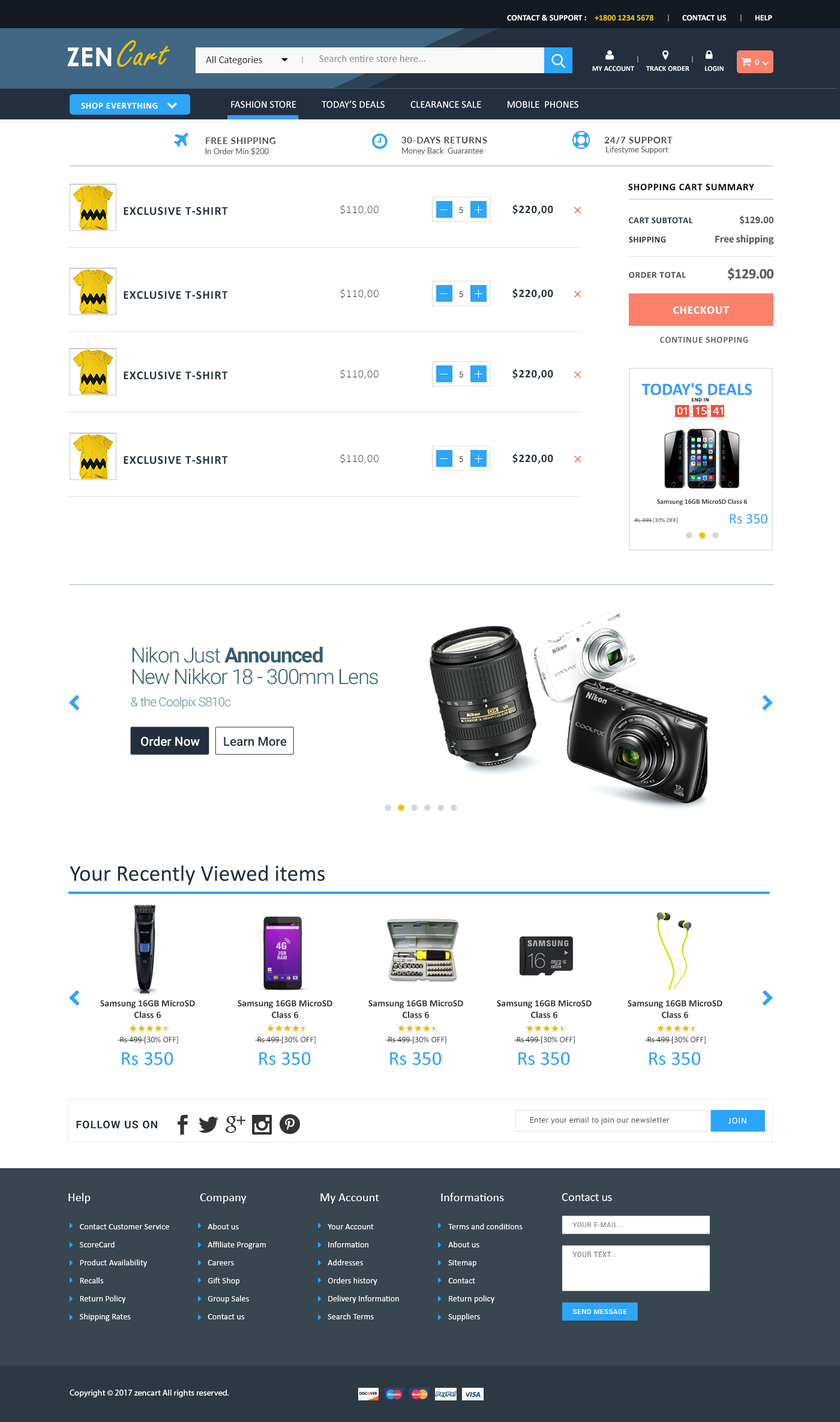
<style>
.page{position:relative;width:840px;height:1422px;background:#ffffff}
.page>*{position:absolute;margin:0}
.t1{font:8.4px "Calibri-Bold";color:#ffffff;text-transform:uppercase}
.t2{font:8.4px "Calibri-Bold";color:#edc300;text-transform:uppercase}
.t3{font:7.2px "Calibri-Bold";text-transform:uppercase}
.t4{font:38.4px "FreestyleScript-Regular";color:#edc300;font-weight:bold}
.t5{font:26px "CenturyGothic-Bold";letter-spacing:0.02em;color:#ffffff;text-transform:uppercase}
.t6{font:10.2px "Calibri";color:#32302f}
.t7{font:7.8px "Calibri"}
.t8{font:10.2px "Calibri";color:#8e8e8e}
.t9{font:7.2px "Calibri-Bold";letter-spacing:0.01em;color:#ffffff;text-transform:uppercase}
.t10{font:9px "Calibri-Bold";color:#e5edf4;text-transform:uppercase}
.t11{font:10.2px "Calibri";color:#ffffff}
.t12{font:9px "Calibri-Bold";letter-spacing:0.05em;color:#ffffff;text-transform:uppercase}
.t13{font:9px "Lato-Bold";letter-spacing:0.05em;color:#4b4b4b}
.t14{font:7.8px "Lato-Regular";color:#666666}
.t15{font:10px "Calibri-Bold";letter-spacing:0.05em;color:#131a22}
.t16{font:12px "Calibri-Bold";letter-spacing:0.05em;color:#232f3e}
.t17{font:10.8px "Calibri-Light";letter-spacing:0.05em;color:#232f3e}
.t18{font:9px "SourceSansPro-Regular";letter-spacing:0.05em;color:#595959}
.t19{font:11.4px "Calibri-Bold";letter-spacing:0.05em;color:#232f3e}
.t20{font:9px/9.6px "Calibri-Bold";letter-spacing:0.025em;color:#232f3e;text-transform:uppercase}
.t21{font:10.2px/9.6px "SourceSansPro-Bold";letter-spacing:-0.015em;color:#595959}
.t22{font:14.4px "Calibri-Bold";letter-spacing:-0.015em;color:#595959}
.t23{font:9px "Calibri-Bold";letter-spacing:0.05em;color:#595959}
.t24{font:11.4px "Calibri-Bold";letter-spacing:0.05em;color:#ffffff}
.t25{font:9px "Calibri-Bold";letter-spacing:0.05em;color:#676666;text-transform:uppercase}
.t26{font:17.5px "Calibri-Bold";color:#379aff;text-transform:uppercase}
.t27{font:5.2px "Calibri-Bold";letter-spacing:0.075em;color:#000000;text-transform:uppercase}
.t28{font:7px "Calibri-Bold";color:#373737}
.t29{font:6.1px "Calibri";color:#373737}
.t30{font:14.5px "Calibri";color:#2ca5fa}
.t31{font:20.8px/22px "Roboto-Light";letter-spacing:-0.04em;color:#325f70}
.t32{font:20.8px/22px "Roboto-Bold";letter-spacing:-0.04em;color:#325f70}
.t33{font:12.5px/22px "Roboto-Light";letter-spacing:-0.04em;color:#6397aa}
.t34{font:12.5px "Roboto-Medium";color:#ffffff}
.t35{font:12.5px "Roboto-Medium";color:#232f3e}
.t36{font:22.8px "Calibri";color:#232f3e}
.t37{font:9.6px "Calibri-Bold";color:#373737}
.t38{font:8.4px "Calibri";color:#373737}
.t39{font:19.9px "Calibri";color:#2ca5fa}
.t40{font:10.7px "Roboto-Bold";letter-spacing:0.05em;color:#232f3e}
.t41{font:7.6px "Roboto-Light";letter-spacing:0.05em;color:#3f3d3d}
.t42{font:9px "Calibri";letter-spacing:0.05em;color:#ffffff}
.t43{font:8.4px/18px "Calibri";letter-spacing:0.01em;color:#ffffff}
.t44{font:12px "Calibri";letter-spacing:0.01em;color:#ffffff}
.t45{font:12px "Calibri";color:#ffffff}
.t46{font:6.6px "Roboto-Regular";letter-spacing:0.07em;color:#7e7f84;text-transform:uppercase}
.t47{font:6.6px "Roboto-Regular";letter-spacing:0.07em;color:#ffffff;text-transform:uppercase}
.t48{font:8.4px "MyriadPro-Regular";letter-spacing:0.01em;color:#ffffff}
</style>
<div class="page">
<p class="t1" style="left:507px;top:14px;width:79px;height:7px">Contact &amp; Support :</p>
<p class="t1" style="left:595px;top:15px;width:177px;height:6px"><span class="t2">+1800 1234 5678 </span>              Contact Us               Help</p>
<p class="t3" style="left:668px;top:14px;width:1px;height:8px">|</p>
<p class="t3" style="left:740px;top:14px;width:2px;height:8px">|</p>
<p class="t4" style="left:117px;top:40px;width:53px;height:27px">Cart</p>
<p class="t5" style="left:67px;top:47px;width:45px;height:20px">Zen</p>
<p class="t6" style="left:206px;top:56px;width:56px;height:9px">All Categories</p>
<p class="t7" style="left:302px;top:56px;width:1px;height:8px">|</p>
<p class="t8" style="left:319px;top:55px;width:106px;height:7px">Search entire store here...</p>
<p class="t9" style="left:592px;top:66px;width:132px;height:5px">my account       Track Order         Login</p>
<p class="t3" style="left:637px;top:56px;width:1px;height:7px">|</p>
<p class="t3" style="left:692px;top:56px;width:1px;height:7px">|</p>
<p class="t10" style="left:755px;top:59px;width:5px;height:6px">0</p>
<p class="t11" style="left:231px;top:100px;width:347px;height:8px">FASHION STORE           TODAY’S DEALS           CLEARANCE SALE           MOBILE  PHONES</p>
<p class="t12" style="left:81px;top:103px;width:77px;height:6px">Shop Everything</p>
<p class="t13" style="left:206px;top:137px;width:69px;height:7px">FREE SHIPPING</p>
<p class="t13" style="left:401px;top:137px;width:86px;height:6px">30-DAYS RETURNS</p>
<p class="t13" style="left:604px;top:137px;width:69px;height:7px">24/7 SUPPORT</p>
<p class="t14" style="left:205px;top:148px;width:64px;height:7px">In Order Min $200</p>
<p class="t14" style="left:402px;top:148px;width:82px;height:7px">Money Back  Guarantee</p>
<p class="t14" style="left:606px;top:146px;width:62px;height:8px">Lifestyme Support</p>
<p class="t15" style="left:628px;top:184px;width:126px;height:7px">SHOPPING CART SUMMARY</p>
<p class="t16" style="left:124px;top:207px;width:104px;height:8px">EXCLUSIVE T-SHIRT</p>
<p class="t17" style="left:340px;top:205px;width:39px;height:10px">$110,00</p>
<p class="t18" style="left:459px;top:207px;width:4px;height:7px">5</p>
<p class="t19" style="left:512px;top:204px;width:41px;height:11px">$220,00</p>
<p class="t20" style="left:629px;top:217px;width:63px;height:26px">Cart subtotal<br><br>Shipping</p>
<p class="t21" style="left:715px;top:215px;width:59px;height:30px;text-align:right">$129.00<br><br>Free shipping</p>
<p class="t22" style="left:728px;top:268px;width:46px;height:12px">$129.00</p>
<p class="t23" style="left:629px;top:272px;width:57px;height:6px">ORDER TOTAL</p>
<p class="t16" style="left:124px;top:291px;width:104px;height:8px">EXCLUSIVE T-SHIRT</p>
<p class="t17" style="left:340px;top:289px;width:39px;height:10px">$110,00</p>
<p class="t18" style="left:459px;top:291px;width:4px;height:7px">5</p>
<p class="t19" style="left:512px;top:288px;width:41px;height:11px">$220,00</p>
<p class="t24" style="left:673px;top:306px;width:56px;height:8px">CHECKOUT</p>
<p class="t25" style="left:660px;top:337px;width:88px;height:6px">Continue Shopping</p>
<p class="t16" style="left:124px;top:371px;width:104px;height:9px">EXCLUSIVE T-SHIRT</p>
<p class="t17" style="left:340px;top:369px;width:39px;height:10px">$110,00</p>
<p class="t18" style="left:459px;top:371px;width:4px;height:7px">5</p>
<p class="t19" style="left:512px;top:368px;width:41px;height:11px">$220,00</p>
<p class="t26" style="left:641px;top:383px;width:111px;height:12px">Today's Deals</p>
<p class="t27" style="left:692px;top:398px;width:17px;height:4px">end in</p>
<p class="t16" style="left:124px;top:456px;width:104px;height:8px">EXCLUSIVE T-SHIRT</p>
<p class="t17" style="left:340px;top:454px;width:39px;height:10px">$110,00</p>
<p class="t18" style="left:459px;top:456px;width:4px;height:7px">5</p>
<p class="t19" style="left:512px;top:453px;width:41px;height:11px">$220,00</p>
<p class="t28" style="left:657px;top:499px;width:90px;height:6px">Samsung 16GB MicroSD Class 6</p>
<p class="t29" style="left:633px;top:518px;width:44px;height:5px">Rs 499 [30% OFF]</p>
<p class="t30" style="left:730px;top:514px;width:37px;height:10px">Rs 350</p>
<p class="t31" style="left:131px;top:646px;width:247px;height:63px">Nikon Just <span class="t32">Announced<br></span>New Nikkor 18 - 300mm Lens<br><span class="t33">&amp; the Coolpix S810c</span></p>
<p class="t34" style="left:141px;top:736px;width:59px;height:10px">Order Now</p>
<p class="t35" style="left:224px;top:737px;width:63px;height:9px">Learn More</p>
<p class="t36" style="left:70px;top:865px;width:255px;height:20px">Your Recently Viewed items</p>
<p class="t37" style="left:100px;top:1000px;width:95px;height:18px;text-align:center">Samsung 16GB MicroSD<br>Class 6</p>
<p class="t37" style="left:238px;top:1000px;width:94px;height:18px;text-align:center">Samsung 16GB MicroSD<br>Class 6</p>
<p class="t37" style="left:368px;top:1000px;width:95px;height:18px;text-align:center">Samsung 16GB MicroSD<br>Class 6</p>
<p class="t37" style="left:497px;top:1000px;width:95px;height:18px;text-align:center">Samsung 16GB MicroSD<br>Class 6</p>
<p class="t37" style="left:628px;top:1000px;width:94px;height:18px;text-align:center">Samsung 16GB MicroSD<br>Class 6</p>
<p class="t38" style="left:118px;top:1036px;width:60px;height:8px">Rs 499 [30% OFF]</p>
<p class="t38" style="left:255px;top:1036px;width:61px;height:8px">Rs 499 [30% OFF]</p>
<p class="t38" style="left:386px;top:1036px;width:60px;height:8px">Rs 499 [30% OFF]</p>
<p class="t38" style="left:514px;top:1036px;width:61px;height:8px">Rs 499 [30% OFF]</p>
<p class="t38" style="left:645px;top:1036px;width:61px;height:8px">Rs 499 [30% OFF]</p>
<p class="t39" style="left:122px;top:1052px;width:51px;height:13px">Rs 350</p>
<p class="t39" style="left:259px;top:1052px;width:52px;height:13px">Rs 350</p>
<p class="t39" style="left:390px;top:1052px;width:52px;height:13px">Rs 350</p>
<p class="t39" style="left:518px;top:1052px;width:52px;height:13px">Rs 350</p>
<p class="t39" style="left:649px;top:1052px;width:52px;height:13px">Rs 350</p>
<p class="t40" style="left:76px;top:1120px;width:81px;height:9px">FOLLOW US ON</p>
<p class="t41" style="left:530px;top:1117px;width:140px;height:7px">Enter your email to join our newsletter</p>
<p class="t42" style="left:728px;top:1118px;width:18px;height:6px">JOIN</p>
<p class="t43" style="left:68px;top:1193px;width:101px;height:128px"><span class="t44">Help<br><br></span>      Contact Customer Service<br>      ScoreCard<br>      Product Availability<br>      Recalls<br>      Return Policy<br>      Shipping Rates</p>
<p class="t43" style="left:200px;top:1193px;width:66px;height:126px"><span class="t44">Company<br><br></span>    About us<br>    Affiliate Program<br>    Careers<br>    Gift Shop<br>    Group Sales<br>    Contact us</p>
<p class="t43" style="left:320px;top:1193px;width:79px;height:126px"><span class="t44">My Account<br><br> </span>   Your Account<br>    Information<br>    Addresses<br>    Orders history<br>    Delivery Information<br>    Search Terms</p>
<p class="t43" style="left:441px;top:1193px;width:82px;height:128px"><span class="t44">Informations<br><br></span>    Terms and conditions<br>    About us<br>    Sitemap<br>    Contact<br>    Return policy<br>    Suppliers</p>
<p class="t45" style="left:562px;top:1193px;width:50px;height:8px">Contact us</p>
<p class="t46" style="left:572px;top:1222px;width:51px;height:5px">your e-mail...</p>
<p class="t46" style="left:572px;top:1252px;width:44px;height:5px">your text...</p>
<p class="t47" style="left:573px;top:1309px;width:54px;height:5px">Send MESSAGE</p>
<p class="t48" style="left:70px;top:1390px;width:159px;height:7px">Copyright © 2017 zencart All rights reserved.</p>
</div>
